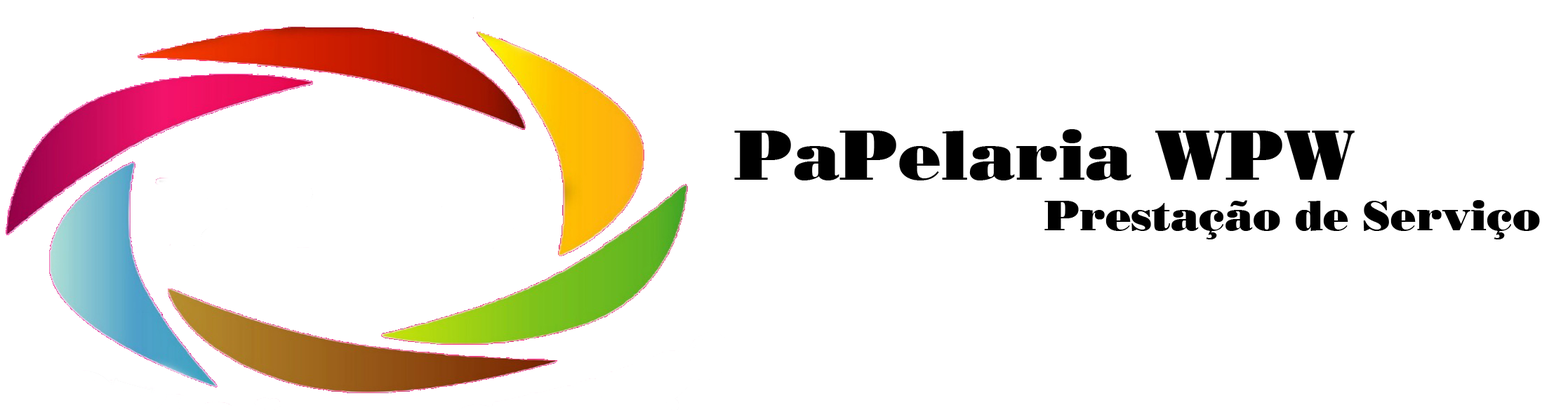
<style>
.page{position:relative;width:1568px;height:410px;background:#ffffff}
.page>*{position:absolute;margin:0}
.t1{font:42.1px "Pepper";color:#000000}
.t2{font:70.2px "Pepper";color:#000000}
</style>
<div class="page">
<p class="t1" style="left:734px;top:129px;width:806px;height:110px;text-align:center"><span class="t2">PaPelaria WPW<br></span>Prestação de Serviço</p>
</div>
